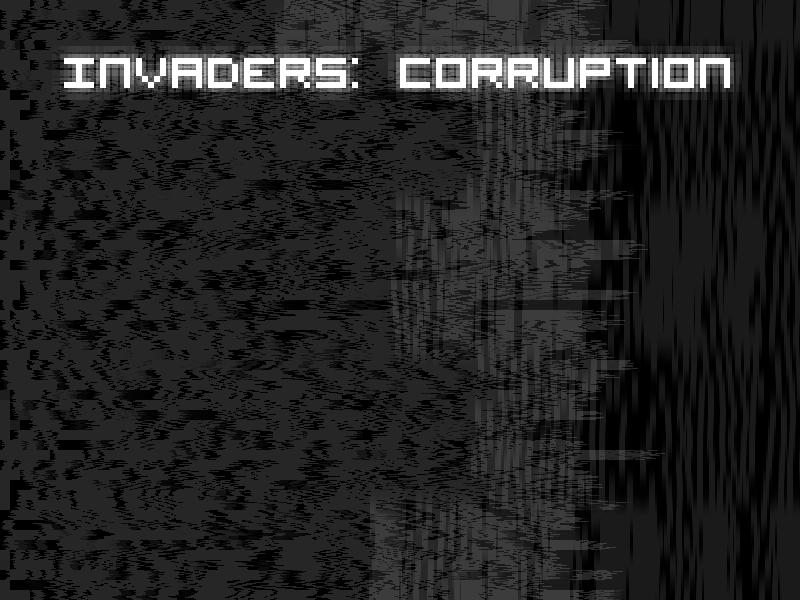
<style>
.page{position:relative;width:800px;height:600px;background:#262626}
.page>*{position:absolute;margin:0}
.t1{font:60px "VisitorTT1BRK";color:#ffffff}
</style>
<div class="page">
<p class="t1" style="left:64px;top:58px;width:666px;height:30px">Invaders: Corruption</p>
</div>
